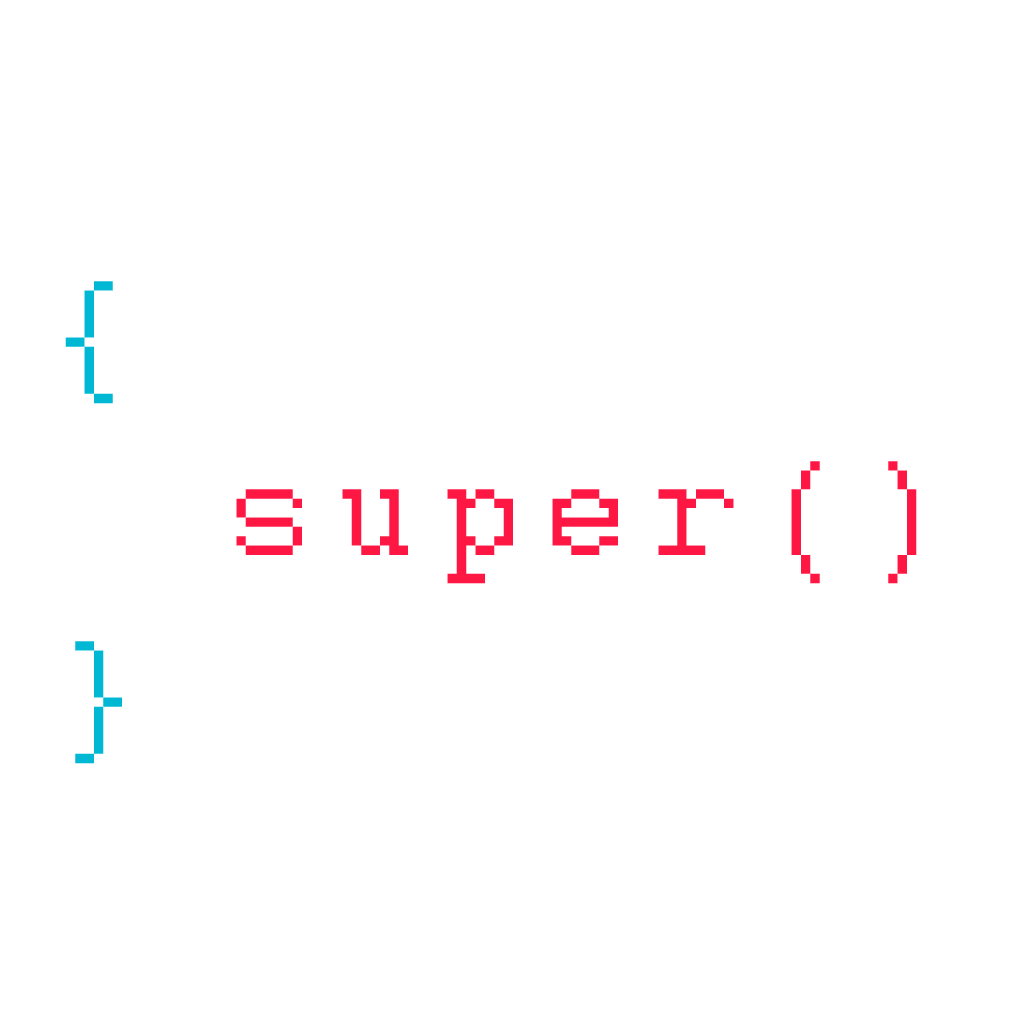
<style>
.page{position:relative;width:1024px;height:1024px;background:#ffffff}
.page>*{position:absolute;margin:0}
.t1{font:150px "Courier";letter-spacing:0.14em;color:#ff1744}
.t2{font:150px "Courier";letter-spacing:0.14em;color:#00b8d4}
</style>
<div class="page">
<p class="t1" style="left:65px;top:281px;width:852px;height:483px"><span class="t2">{<br></span>     super()<br><span class="t2">}</span></p>
</div>
